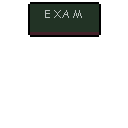
<style>
.page{position:relative;width:128px;height:128px;background:#ffffff}
.page>*{position:absolute;margin:0}
.t1{font:11px "ComicSansMS";color:#bac1be}
</style>
<div class="page">
<p class="t1" style="left:45px;top:10px;width:37px;height:8px">E XA M</p>
</div>
